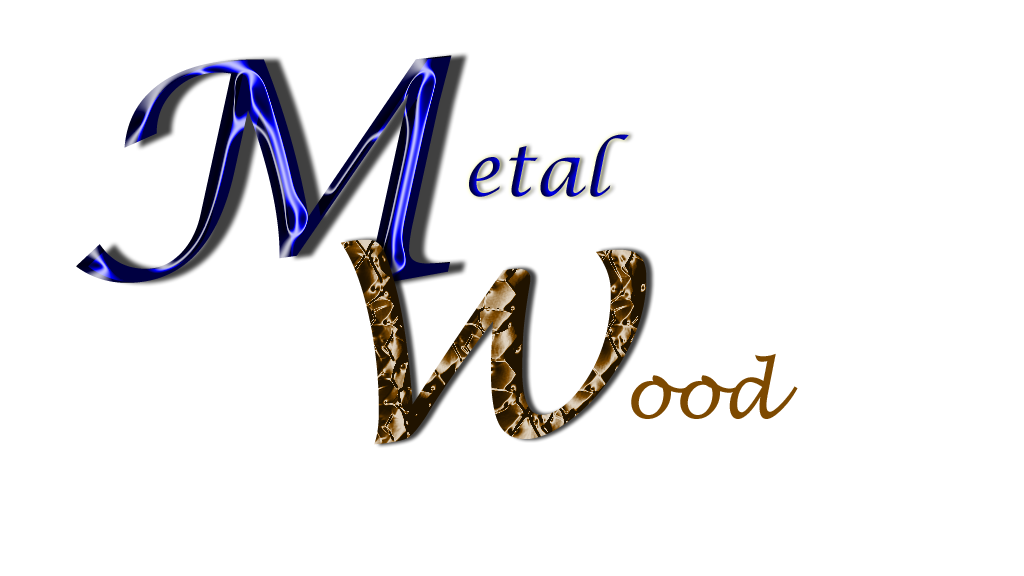
<style>
.page{position:relative;width:1024px;height:576px;background:#ffffff}
.page>*{position:absolute;margin:0}
.t1{font:304.6px "LucidaCalligraphy-Italic";scale:1.11 1}
.t2{font:72px "LucidaCalligraphy-Italic"}
.t3{font:255.4px "LucidaHandwriting-Italic";scale:1.34 1}
.t4{font:74.9px "LucidaHandwriting-Italic";color:#7d4900;scale:0.97 1}
</style>
<div class="page">
<p class="t1" style="left:76px;top:55px;width:376px;height:232px">M</p>
<p class="t2" style="left:469px;top:134px;width:160px;height:63px">etal</p>
<p class="t3" style="left:341px;top:239px;width:306px;height:206px">W</p>
<p class="t4" style="left:631px;top:353px;width:167px;height:66px">ood</p>
</div>
